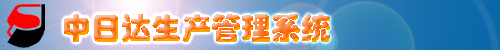
<style>
.page{position:relative;width:500px;height:50px}
.page>*{position:absolute;margin:0}
.t1{font:30px "STHupo"}
</style>
<div class="page">
<p class="t1" style="left:64px;top:14px;width:266px;height:28px">中日达生产管理系统</p>
</div>
